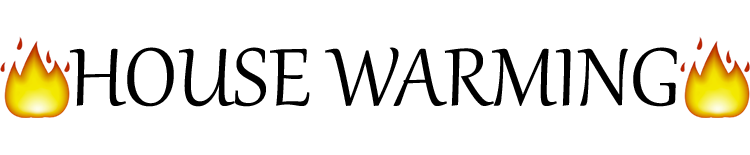
<style>
.page{position:relative;width:750px;height:155px;background:#ffffff}
.page>*{position:absolute;margin:0}
.t1{font:100px "Gabriola";color:#000000}
</style>
<div class="page">
<p class="t1" style="left:69px;top:47px;width:608px;height:60px">HOUSE WARMING</p>
</div>
